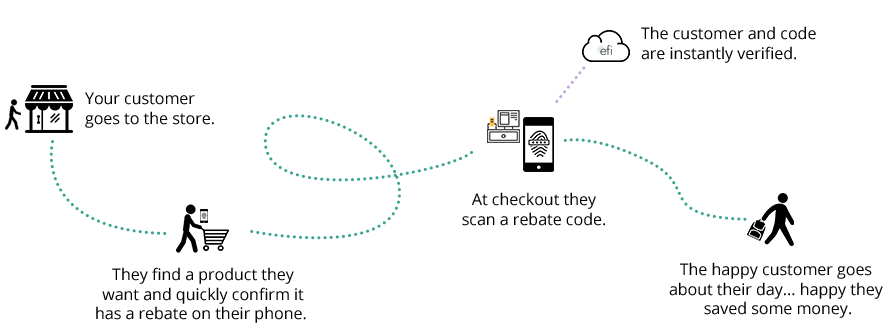
<style>
.page{position:relative;width:887px;height:334px;background:#ffffff}
.page>*{position:absolute;margin:0}
.t1{font:16px "OpenSans";color:#010101}
</style>
<div class="page">
<p class="t1" style="left:641px;top:26px;width:175px;height:37px">The customer and code <br>are instantly verified.</p>
<p class="t1" style="left:85px;top:92px;width:129px;height:36px">Your customer <br>goes to the store.</p>
<p class="t1" style="left:462px;top:192px;width:143px;height:34px;text-align:center">At checkout they<br>scan a rebate code.</p>
<p class="t1" style="left:96px;top:267px;width:210px;height:56px;text-align:center">They find a product they<br>want and quickly confirm it<br>has a rebate on their phone.</p>
<p class="t1" style="left:669px;top:262px;width:214px;height:56px;text-align:center">The happy customer goes <br>about their day... happy they <br>saved some money.</p>
</div>
